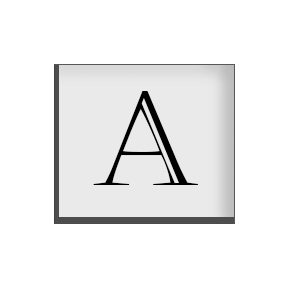
<style>
.page{position:relative;width:288px;height:288px;background:#ffffff}
.page>*{position:absolute;margin:0}
.t1{font:130px "Castellar";color:#000000}
</style>
<div class="page">
<p class="t1" style="left:93px;top:91px;width:105px;height:94px">A</p>
</div>
